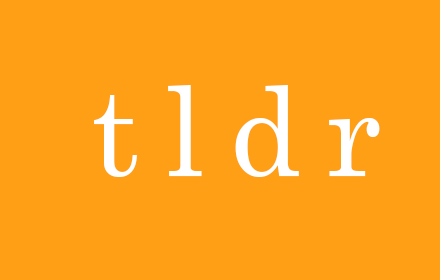
<style>
.page{position:relative;width:440px;height:280px;background:#ff9f16}
.page>*{position:absolute;margin:0}
.t1{font:125px "CenturySchoolbook";letter-spacing:0.2em;color:#ffffff}
</style>
<div class="page">
<p class="t1" style="left:94px;top:85px;width:286px;height:92px">tldr</p>
</div>
